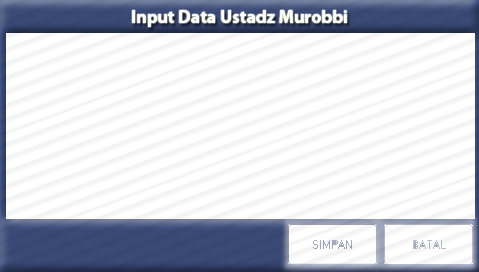
<style>
.page{position:relative;width:479px;height:272px;background:#ffffff}
.page>*{position:absolute;margin:0}
.t1{font:18px "MyriadPro-Bold";color:#ffffff}
</style>
<div class="page">
<p class="t1" style="left:132px;top:10px;width:215px;height:17px">Input Data Ustadz Murobbi</p>
</div>
